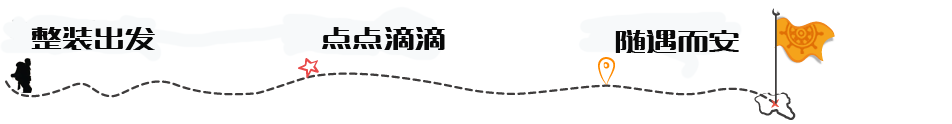
<style>
.page{position:relative;width:952px;height:124px;background:#ffffff}
.page>*{position:absolute;margin:0}
.t1{font:24px "MFLangQian_Noncommercial-Regular";color:#090909;scale:1.3 1}
</style>
<div class="page">
<p class="t1" style="left:31px;top:27px;width:124px;height:23px">整装出发</p>
<p class="t1" style="left:322px;top:27px;width:123px;height:23px">点点滴滴</p>
<p class="t1" style="left:615px;top:30px;width:124px;height:23px">随遇而安</p>
</div>
